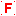
<style>
.page{position:relative;width:16px;height:16px;background:#ffffff}
.page>*{position:absolute;margin:0}
.t1{font:13.9px "Bahnschrift-Bold";letter-spacing:0.05em;color:#ff0000;font-weight:bold}
</style>
<div class="page">
<p class="t1" style="left:5px;top:3px;width:7px;height:10px">F</p>
</div>
